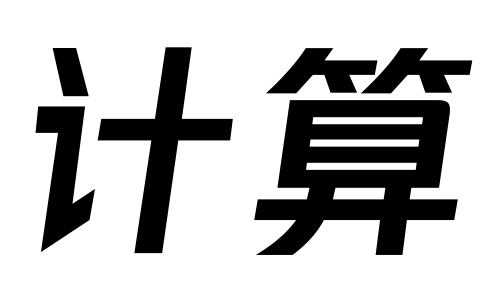
<style>
.page{position:relative;width:500px;height:300px;background:#ffffff}
.page>*{position:absolute;margin:0}
.t1{font:229.2px "FontName";color:#000000}
</style>
<div class="page">
<p class="t1" style="left:35px;top:47px;width:438px;height:208px">计算</p>
</div>
